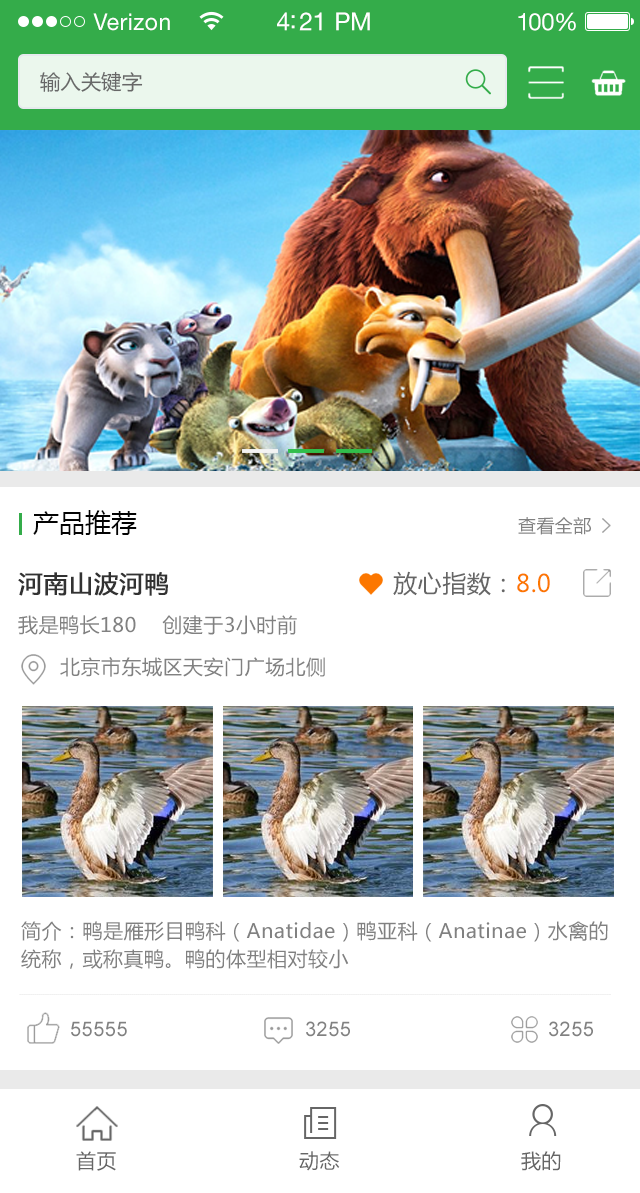
<style>
.page{position:relative;width:640px;height:1193px;background:#ffffff}
.page>*{position:absolute;margin:0}
.t1{font:23px "HelveticaNeueLTStd-Roman";letter-spacing:0.02em;color:#ffffff}
.t2{font:25px "HelveticaNeueLTStd-Roman";letter-spacing:-0.02em;color:#ffffff}
.t3{font:24px "HelveticaNeueLTStd-Roman";letter-spacing:-0.02em;color:#ffffff}
.t4{font:20.3px "MicrosoftYaHei";color:#676767}
.t5{font:26px "MicrosoftYaHei";color:#030303}
.t6{font:18px "MicrosoftYaHei";letter-spacing:0.025em;color:#818181}
.t7{font:24px "MicrosoftYaHei";letter-spacing:0.025em;color:#323232;font-weight:bold}
.t8{font:24px "MicrosoftYaHei";letter-spacing:0.025em;color:#666666}
.t9{font:24px "MicrosoftYaHei";letter-spacing:0.025em;color:#fc7700}
.t10{font:20px "MicrosoftYaHei";letter-spacing:0.025em;color:#818181}
.t11{font:20px/28px "MicrosoftYaHei";letter-spacing:0.025em;color:#818181}
.t12{font:20px "ArialMT";letter-spacing:0.025em;color:#818181}
.t13{font:20px "MicrosoftYaHei";letter-spacing:0.025em;color:#666666}
</style>
<div class="page">
<p class="t1" style="left:93px;top:13px;width:77px;height:18px">Verizon</p>
<p class="t2" style="left:277px;top:12px;width:93px;height:19px">4:21 PM</p>
<p class="t3" style="left:518px;top:12px;width:58px;height:19px">100%</p>
<p class="t4" style="left:40px;top:71px;width:103px;height:21px">输入关键字</p>
<p class="t5" style="left:33px;top:510px;width:104px;height:25px">产品推荐</p>
<p class="t6" style="left:518px;top:517px;width:73px;height:18px">查看全部</p>
<p class="t7" style="left:18px;top:572px;width:150px;height:24px">河南山波河鸭</p>
<p class="t8" style="left:393px;top:571px;width:157px;height:25px">放心指数：<span class="t9">8.0</span></p>
<p class="t10" style="left:18px;top:615px;width:279px;height:20px">我是鸭长180    创建于3小时前</p>
<p class="t10" style="left:60px;top:657px;width:265px;height:20px">北京市东城区天安门广场北侧</p>
<p class="t11" style="left:21px;top:921px;width:587px;height:48px">简介：鸭是雁形目鸭科（Anatidae）鸭亚科（Anatinae）水禽的<br>统称，或称真鸭。鸭的体型相对较小</p>
<p class="t12" style="left:71px;top:1021px;width:56px;height:16px">55555</p>
<p class="t12" style="left:306px;top:1021px;width:44px;height:16px">3255</p>
<p class="t12" style="left:549px;top:1021px;width:44px;height:16px">3255</p>
<p class="t13" style="left:76px;top:1151px;width:40px;height:20px">首页</p>
<p class="t13" style="left:299px;top:1151px;width:41px;height:20px">动态</p>
<p class="t13" style="left:521px;top:1151px;width:40px;height:20px">我的</p>
</div>
